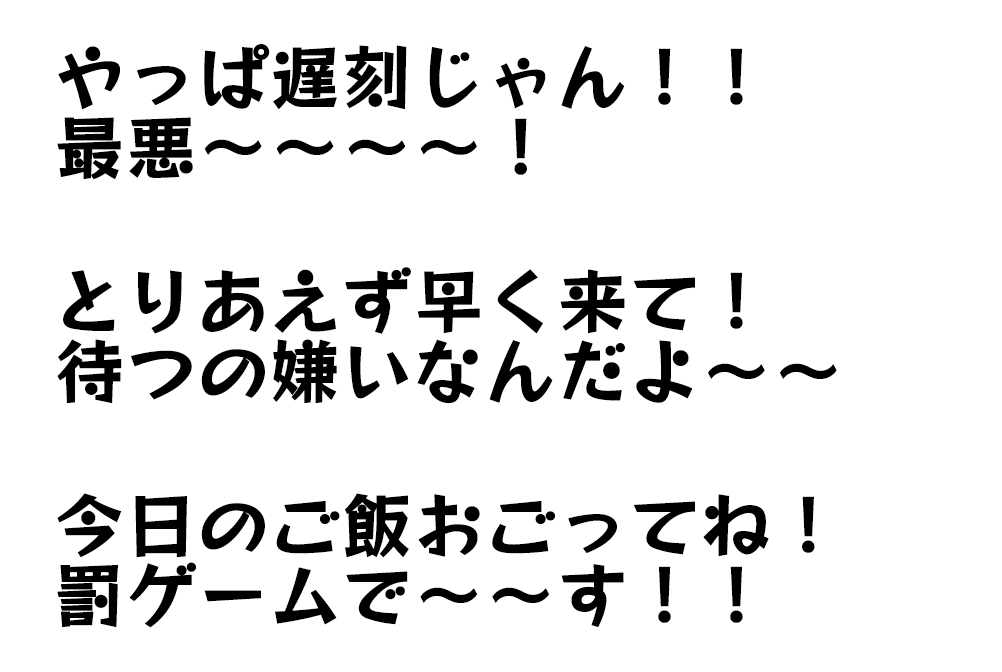
<style>
.page{position:relative;width:1002px;height:672px;background:#ffffff}
.page>*{position:absolute;margin:0}
.t1{font:70px/70px "RocknRollOne-Regular";color:#000000;font-weight:bold}
</style>
<div class="page">
<p class="t1" style="left:57px;top:44px;width:686px;height:136px">やっぱ遅刻じゃん！！<br>最悪～～～～！</p>
<p class="t1" style="left:57px;top:267px;width:780px;height:137px">とりあえず早く来て！<br>待つの嫌いなんだよ～～</p>
<p class="t1" style="left:57px;top:493px;width:758px;height:135px">今日のご飯おごってね！<br>罰ゲームで～～す！！</p>
</div>
